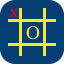
<style>
.page{position:relative;width:64px;height:64px;background:#053e72}
.page>*{position:absolute;margin:0}
.t1{font:12.5px "Times-Roman";color:#ff0505}
.t2{font:19.3px "Times-Roman";color:#f8e546}
</style>
<div class="page">
<p class="t1" style="left:9px;top:8px;width:9px;height:9px">X</p>
<p class="t2" style="left:26px;top:26px;width:14px;height:14px">O</p>
</div>
